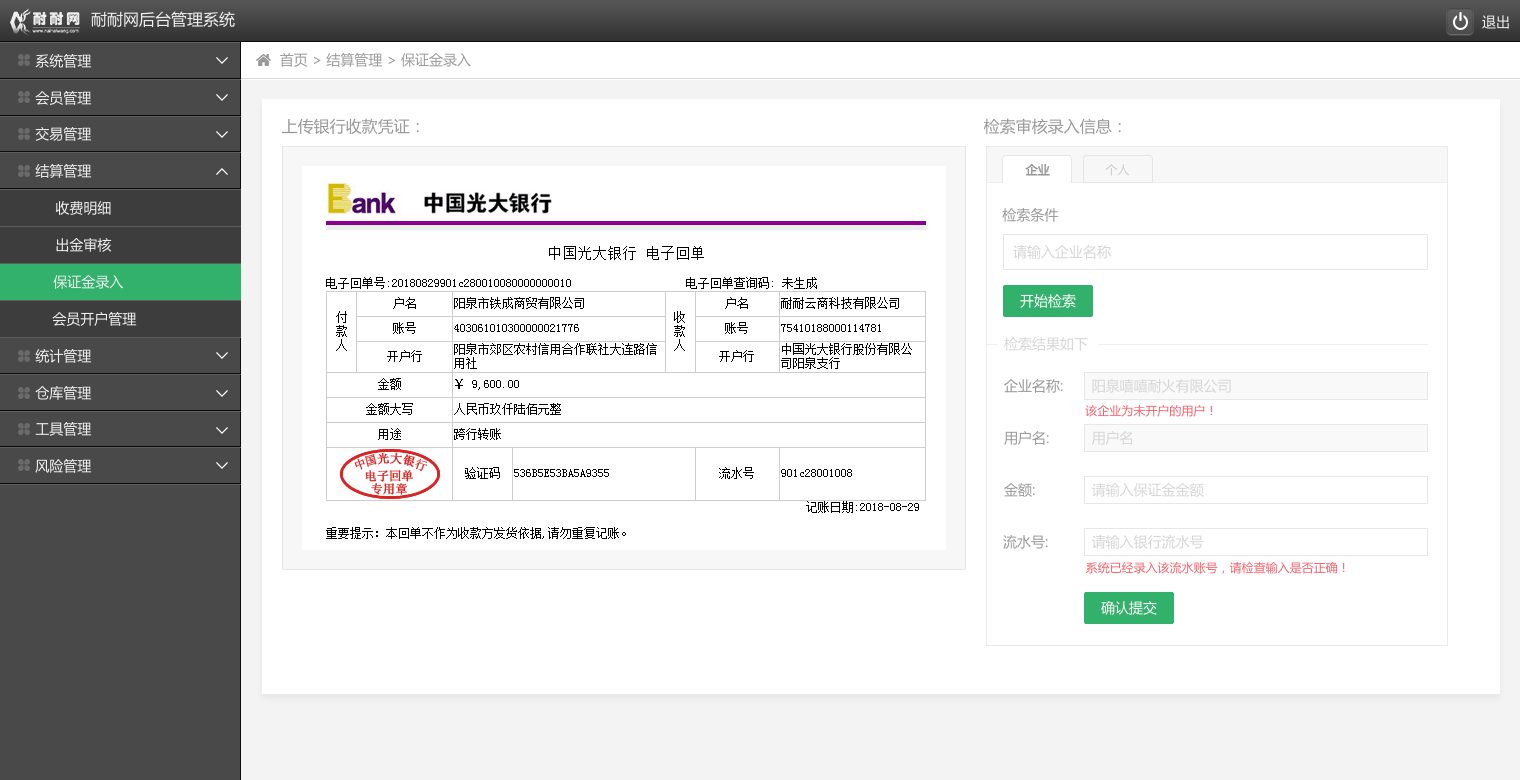
<style>
.page{position:relative;width:1520px;height:780px;background:#ffffff}
.page>*{position:absolute;margin:0}
.t1{font:16px "MicrosoftYaHei";color:#efefef}
.t2{font:14px "MicrosoftYaHei";color:#efefef}
.t3{font:14px "MicrosoftYaHei";color:#999999}
.t4{font:16px "MicrosoftYaHei";color:#999999}
.t5{font:12px "MicrosoftYaHei";color:#999999;font-weight:bold}
.t6{font:12px "MicrosoftYaHei";color:#cccccc}
.t7{font:14px "MicrosoftYaHei";color:#d6d6d6}
.t8{font:14px "MicrosoftYaHei";color:#fffcfc}
.t9{font:12px "MicrosoftYaHei";color:#f4626c}
</style>
<div class="page">
<p class="t1" style="left:91px;top:11px;width:144px;height:17px">耐耐网后台管理系统</p>
<p class="t2" style="left:1482px;top:15px;width:27px;height:14px">退出</p>
<p class="t2" style="left:35px;top:54px;width:57px;height:14px">系统管理</p>
<p class="t3" style="left:280px;top:53px;width:191px;height:14px">首页 &gt; 结算管理 &gt; 保证金录入</p>
<p class="t2" style="left:35px;top:91px;width:57px;height:14px">会员管理</p>
<p class="t4" style="left:282px;top:118px;width:137px;height:17px">上传银行收款凭证：</p>
<p class="t4" style="left:983px;top:118px;width:138px;height:17px">检索审核录入信息：</p>
<p class="t2" style="left:35px;top:127px;width:57px;height:14px">交易管理</p>
<p class="t2" style="left:35px;top:164px;width:57px;height:14px">结算管理</p>
<p class="t5" style="left:1025px;top:164px;width:25px;height:12px">企业</p>
<p class="t6" style="left:1105px;top:164px;width:24px;height:12px">个人</p>
<p class="t2" style="left:55px;top:201px;width:56px;height:14px">收费明细</p>
<p class="t3" style="left:1002px;top:208px;width:57px;height:14px">检索条件</p>
<p class="t2" style="left:56px;top:238px;width:56px;height:14px">出金审核</p>
<p class="t7" style="left:1013px;top:245px;width:98px;height:14px">请输入企业名称</p>
<p class="t2" style="left:53px;top:275px;width:70px;height:14px">保证金录入</p>
<p class="t8" style="left:1020px;top:294px;width:56px;height:14px">开始检索</p>
<p class="t2" style="left:52px;top:312px;width:85px;height:14px">会员开户管理</p>
<p class="t7" style="left:1004px;top:337px;width:84px;height:14px">检索结果如下</p>
<p class="t2" style="left:35px;top:349px;width:57px;height:14px">统计管理</p>
<p class="t2" style="left:35px;top:386px;width:57px;height:14px">仓库管理</p>
<p class="t3" style="left:1004px;top:379px;width:59px;height:14px">企业名称:</p>
<p class="t7" style="left:1092px;top:379px;width:139px;height:14px">阳泉嘻嘻耐火有限公司</p>
<p class="t9" style="left:1085px;top:405px;width:127px;height:12px">该企业为未开户的用户！</p>
<p class="t2" style="left:35px;top:422px;width:57px;height:14px">工具管理</p>
<p class="t3" style="left:1004px;top:431px;width:45px;height:14px">用户名:</p>
<p class="t7" style="left:1092px;top:431px;width:41px;height:14px">用户名</p>
<p class="t2" style="left:35px;top:459px;width:57px;height:14px">风险管理</p>
<p class="t3" style="left:1004px;top:483px;width:31px;height:14px">金额:</p>
<p class="t7" style="left:1091px;top:483px;width:113px;height:14px">请输入保证金金额</p>
<p class="t3" style="left:1003px;top:535px;width:45px;height:14px">流水号:</p>
<p class="t7" style="left:1091px;top:535px;width:113px;height:14px">请输入银行流水号</p>
<p class="t9" style="left:1085px;top:562px;width:260px;height:12px">系统已经录入该流水账号，请检查输入是否正确！</p>
<p class="t8" style="left:1101px;top:601px;width:56px;height:14px">确认提交</p>
</div>
